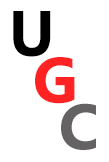
<style>
.page{position:relative;width:109px;height:162px;background:#ffffff}
.page>*{position:absolute;margin:0}
.t1{font:64px "MicrosoftTaiLe-Bold";color:#000000}
.t2{font:64px "MicrosoftTaiLe-Bold";color:#ff2323}
.t3{font:64px "MicrosoftTaiLe-Bold";color:#656262}
</style>
<div class="page">
<p class="t1" style="left:13px;top:11px;width:38px;height:46px">U</p>
<p class="t2" style="left:35px;top:57px;width:40px;height:47px">G</p>
<p class="t3" style="left:61px;top:103px;width:35px;height:47px">C</p>
</div>
